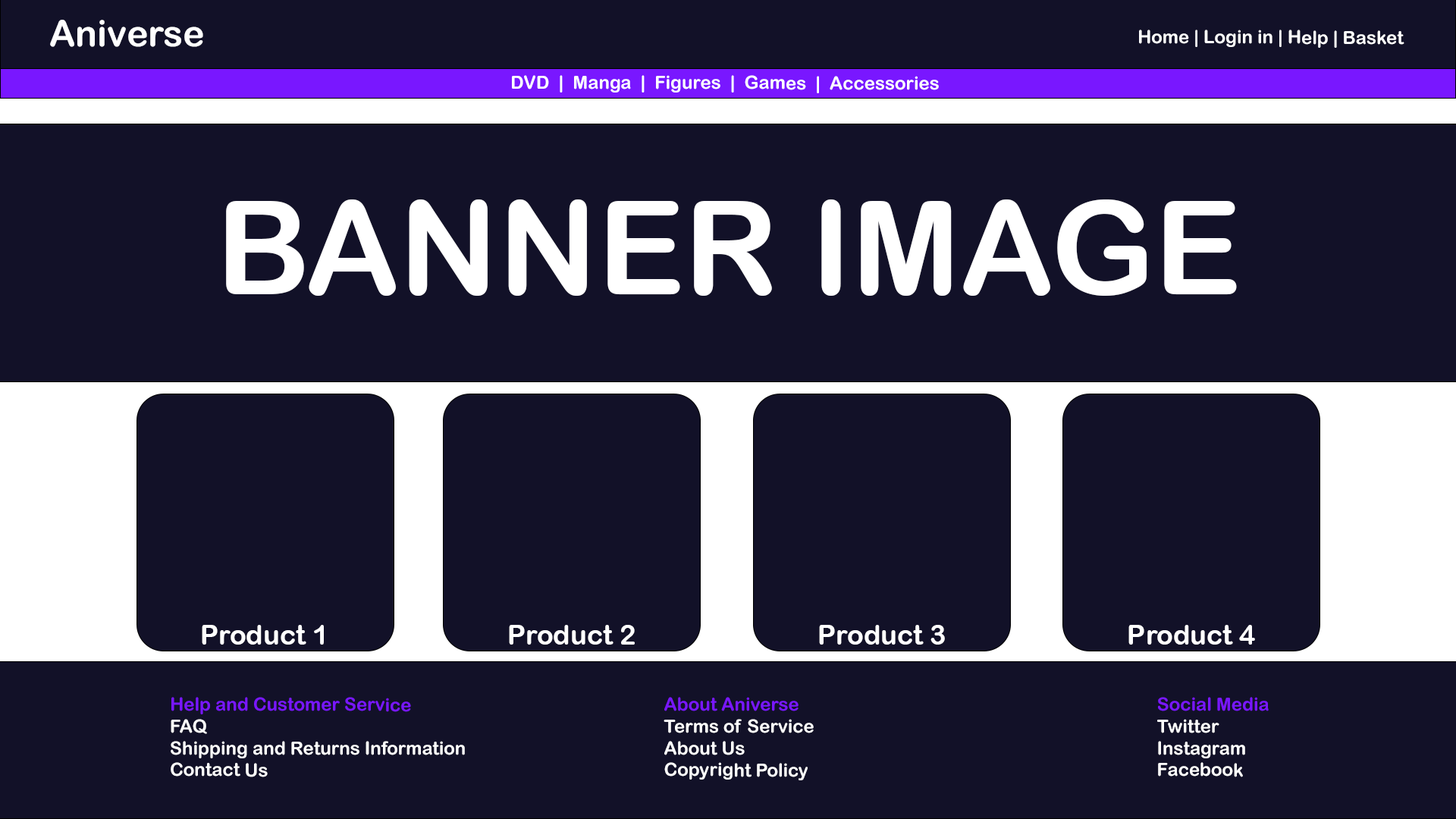
<style>
.page{position:relative;width:1456px;height:819px;background:#121128}
.page>*{position:absolute;margin:0}
.t1{font:36.4px "ArialRoundedMTBold";color:#ffffff}
.t2{font:18.2px "ArialRoundedMTBold";color:#ffffff}
.t3{font:130.5px "ArialRoundedMTBold";color:#ffffff}
.t4{font:27.3px "ArialRoundedMTBold";color:#ffffff}
.t5{font:18.2px "ArialRoundedMTBold";color:#7917ff}
</style>
<div class="page">
<p class="t1" style="left:50px;top:20px;width:153px;height:27px">Aniverse</p>
<p class="t2" style="left:1139px;top:30px;width:265px;height:18px">Home | Login in | Help | Basket</p>
<p class="t2" style="left:512px;top:75px;width:427px;height:18px">DVD  |  Manga  |  Figures  |  Games  |  Accessories</p>
<p class="t3" style="left:226px;top:199px;width:1011px;height:97px">BANNER IMAGE</p>
<p class="t4" style="left:202px;top:625px;width:122px;height:20px">Product 1</p>
<p class="t4" style="left:509px;top:625px;width:126px;height:20px">Product 2</p>
<p class="t4" style="left:819px;top:625px;width:126px;height:20px">Product 3</p>
<p class="t4" style="left:1128px;top:625px;width:127px;height:20px">Product 4</p>
<p class="t2" style="left:171px;top:697px;width:294px;height:80px"><span class="t5">Help and Customer Service<br></span>FAQ<br>Shipping and Returns Information<br>Contact Us</p>
<p class="t2" style="left:664px;top:697px;width:150px;height:83px"><span class="t5">About Aniverse<br></span>Terms of Service<br>About Us<br>Copyright Policy</p>
<p class="t2" style="left:1157px;top:697px;width:112px;height:80px"><span class="t5">Social Media<br></span>Twitter<br>Instagram<br>Facebook</p>
</div>
